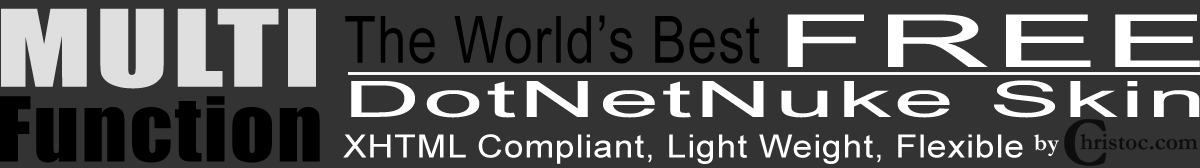
<style>
.page{position:relative;width:1200px;height:168px;background:#333333}
.page>*{position:absolute;margin:0}
.t1{font:98.3px "Impact";letter-spacing:0.025em;color:#dfdfdf;scale:1.37 1}
.t2{font:65.2px "ArialMT";letter-spacing:0.025em;color:#000000;scale:0.8 1}
.t3{font:73.1px "ArialMT";letter-spacing:0.025em;color:#ffffff;scale:2.16 1}
.t4{font:49.8px "ArialMT";letter-spacing:0.025em;color:#ffffff;scale:2.16 1}
.t5{font:82.6px "Impact";letter-spacing:0.025em;color:#000000;scale:1.06 1}
.t6{font:32.1px "ArialMT";letter-spacing:0.025em;color:#ffffff;scale:1.11 1}
.t7{font:24px "Garamond-Bold";letter-spacing:0.025em;color:#ffffff}
</style>
<div class="page">
<p class="t1" style="left:1px;top:8px;width:315px;height:81px">MULTI</p>
<p class="t2" style="left:345px;top:15px;width:415px;height:49px">The World’s Best</p>
<p class="t3" style="left:787px;top:14px;width:413px;height:53px">FREE</p>
<p class="t4" style="left:351px;top:80px;width:849px;height:38px">DotNetNuke Skin</p>
<p class="t5" style="left:0px;top:96px;width:320px;height:67px">Function</p>
<p class="t6" style="left:343px;top:134px;width:680px;height:30px">XHTML Compliant, Light Weight, Flexible</p>
<p class="t7" style="left:1034px;top:134px;width:25px;height:22px">by</p>
</div>
